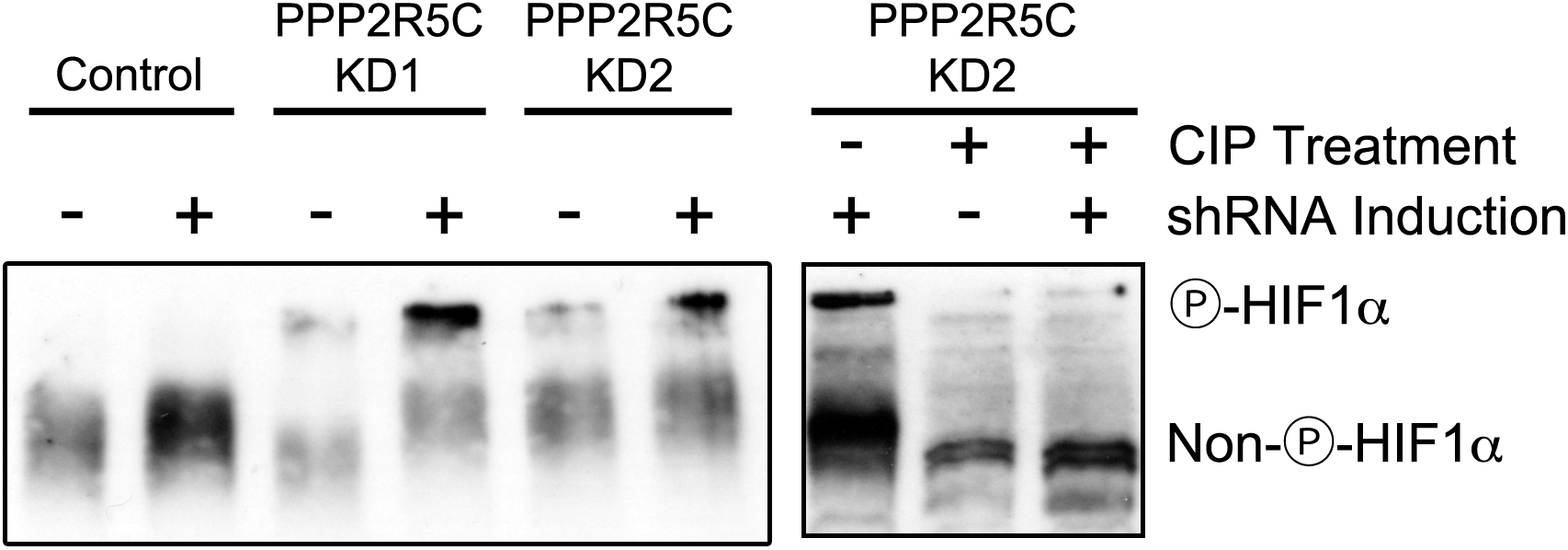
<style>
.page{position:relative;width:1568px;height:550px;background:#ffffff}
.page>*{position:absolute;margin:0}
.t1{font:46px "ArialMT";color:#000000}
.t2{font:53.6px "ArialMT";color:#000000}
.t3{font:76.6px "ArialMT";color:#000000}
.t4{font:53.6px "KozGoPr6N-Regular";color:#000000}
.t5{font:53.6px "Symbol";color:#000000}
</style>
<div class="page">
<p class="t1" style="left:278px;top:2px;width:205px;height:90px;text-align:center">PPP2R5C<br>KD1</p>
<p class="t1" style="left:528px;top:2px;width:205px;height:90px;text-align:center">PPP2R5C<br>KD2</p>
<p class="t1" style="left:870px;top:3px;width:205px;height:89px;text-align:center">PPP2R5C<br>KD2</p>
<p class="t1" style="left:57px;top:56px;width:143px;height:35px">Control</p>
<p class="t2" style="left:1170px;top:124px;width:347px;height:41px">CIP Treatment</p>
<p class="t3" style="left:950px;top:127px;width:38px;height:37px">+</p>
<p class="t3" style="left:1070px;top:127px;width:38px;height:37px">+</p>
<p class="t3" style="left:841px;top:141px;width:21px;height:8px">-</p>
<p class="t3" style="left:176px;top:197px;width:37px;height:36px">+</p>
<p class="t3" style="left:426px;top:197px;width:37px;height:36px">+</p>
<p class="t3" style="left:676px;top:197px;width:37px;height:36px">+</p>
<p class="t3" style="left:833px;top:197px;width:37px;height:36px">+</p>
<p class="t3" style="left:1070px;top:197px;width:38px;height:36px">+</p>
<p class="t2" style="left:1167px;top:196px;width:398px;height:39px">shRNA Induction</p>
<p class="t3" style="left:62px;top:210px;width:21px;height:9px">-</p>
<p class="t3" style="left:311px;top:210px;width:21px;height:9px">-</p>
<p class="t3" style="left:559px;top:210px;width:21px;height:9px">-</p>
<p class="t3" style="left:959px;top:210px;width:21px;height:9px">-</p>
<p class="t2" style="left:1170px;top:278px;width:220px;height:50px"><span class="t4">Ⓟ</span>-HIF1<span class="t5">a</span></p>
<p class="t2" style="left:1169px;top:415px;width:334px;height:51px">Non-<span class="t4">Ⓟ</span>-HIF1<span class="t5">a</span></p>
</div>
